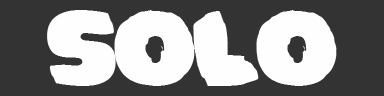
<style>
.page{position:relative;width:384px;height:96px;background:#333333}
.page>*{position:absolute;margin:0}
.t1{font:100px "Bomberman";color:#fefefe}
</style>
<div class="page">
<p class="t1" style="left:47px;top:10px;width:290px;height:76px">SOlo</p>
</div>
